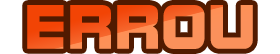
<style>
.page{position:relative;width:280px;height:54px;background:#511a00}
.page>*{position:absolute;margin:0}
.t1{font:69.3px "DFSoGeiStd-W9";scale:0.92 1}
</style>
<div class="page">
<p class="t1" style="left:27px;top:5px;width:226px;height:44px">ERROU</p>
</div>
